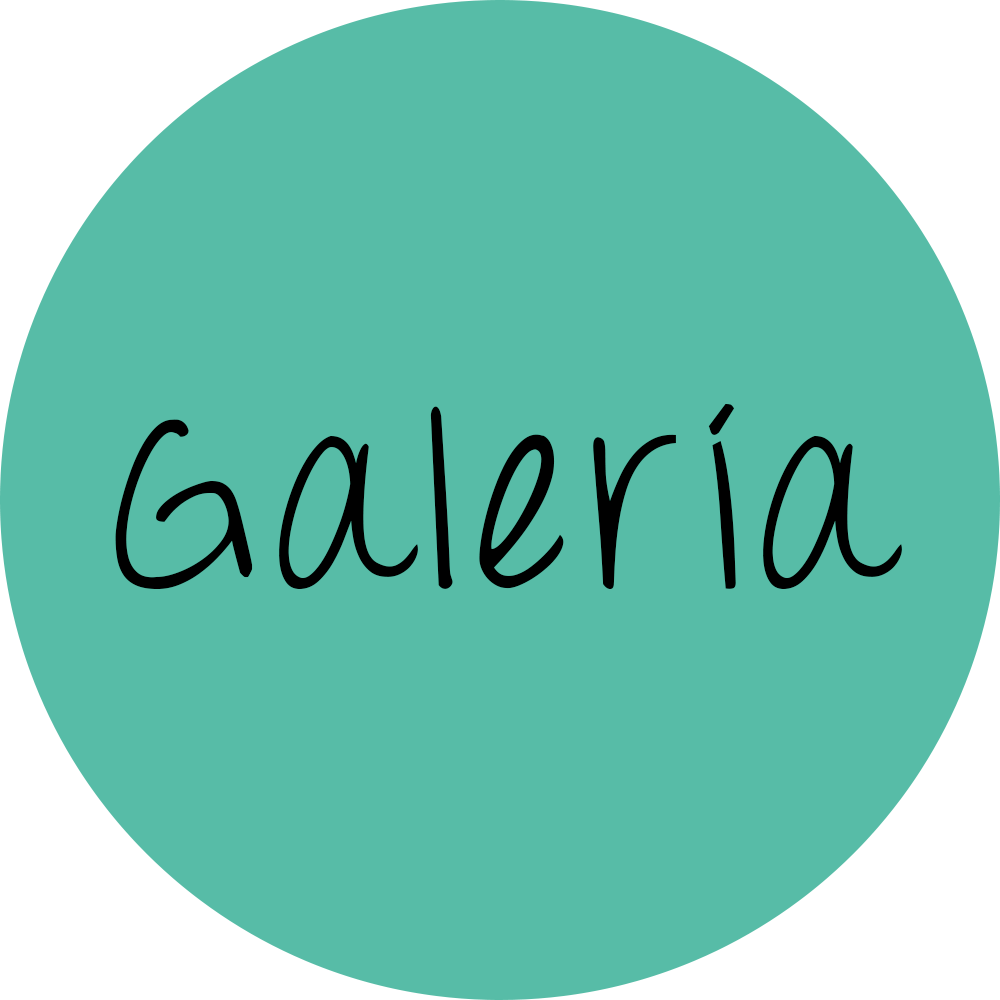
<style>
.page{position:relative;width:1000px;height:1000px;background:#57bca7}
.page>*{position:absolute;margin:0}
.t1{font:250px "ThrowMyHandsUpintheAir";letter-spacing:0.075em;color:#000000}
</style>
<div class="page">
<p class="t1" style="left:115px;top:404px;width:787px;height:185px">Galería</p>
</div>
